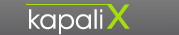
<style>
.page{position:relative;width:179px;height:35px}
.page>*{position:absolute;margin:0}
.t1{font:52px "Corbel";color:#a4df09}
.t2{font:26px "ITCAvantGardeStd-Bk";color:#ffffff}
</style>
<div class="page">
<p class="t1" style="left:106px;top:4px;width:24px;height:25px">x</p>
<p class="t2" style="left:29px;top:9px;width:74px;height:26px">kapali</p>
</div>
